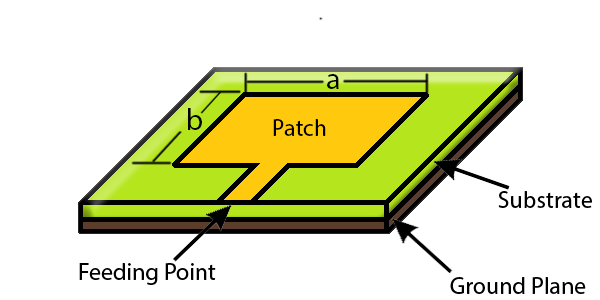
<style>
.page{position:relative;width:600px;height:300px;background:#ffffff}
.page>*{position:absolute;margin:0}
.t1{font:30px "MyriadPro-Regular";color:#000000}
.t2{font:24px "MyriadPro-Regular";color:#000000}
</style>
<div class="page">
<p class="t1" style="left:327px;top:74px;width:12px;height:15px">a</p>
<p class="t1" style="left:188px;top:108px;width:14px;height:22px">b</p>
<p class="t2" style="left:273px;top:119px;width:53px;height:17px">Patch</p>
<p class="t2" style="left:498px;top:191px;width:94px;height:17px">Substrate</p>
<p class="t2" style="left:79px;top:263px;width:137px;height:22px">Feeding Point</p>
<p class="t2" style="left:450px;top:277px;width:136px;height:17px">Ground Plane</p>
</div>
